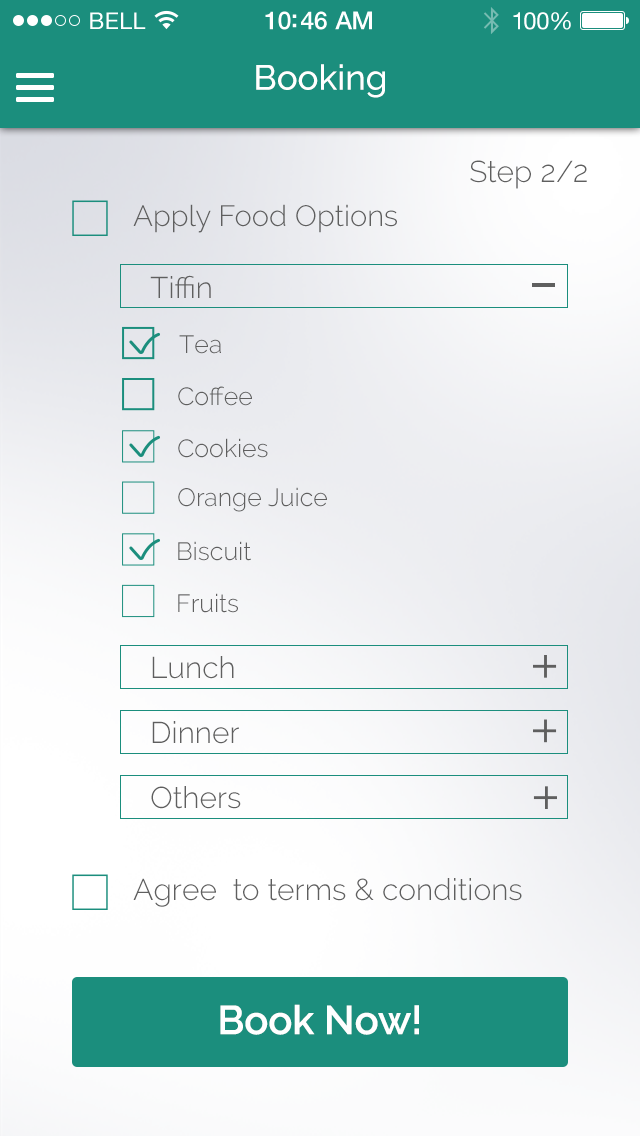
<style>
.page{position:relative;width:640px;height:1136px}
.page>*{position:absolute;margin:0}
.t1{font:23px "HelveticaNeue";letter-spacing:0.02em;color:#ffffff}
.t2{font:25px "HelveticaNeue-Medium";letter-spacing:-0.02em;color:#ffffff}
.t3{font:24px "HelveticaNeue";letter-spacing:-0.02em;color:#ffffff}
.t4{font:35px "Raleway-Medium";color:#ffffff}
.t5{font:30px "Raleway-Light";color:#5f5f5f}
.t6{font:29.2px "Raleway-Light";color:#5f5f5f}
.t7{font:25px "Raleway-Light";color:#5f5f5f}
.t8{font:40px "Raleway-SemiBold";color:#ffffff}
</style>
<div class="page">
<p class="t1" style="left:90px;top:12px;width:56px;height:17px">BELL</p>
<p class="t2" style="left:265px;top:11px;width:107px;height:19px">10:46 AM</p>
<p class="t3" style="left:513px;top:12px;width:58px;height:18px">100%</p>
<p class="t4" style="left:256px;top:64px;width:129px;height:34px">Booking</p>
<p class="t5" style="left:470px;top:160px;width:117px;height:29px">Step 2/2</p>
<p class="t6" style="left:133px;top:204px;width:264px;height:29px">Apply Food Options</p>
<p class="t5" style="left:150px;top:275px;width:61px;height:23px">Tiffin</p>
<p class="t7" style="left:179px;top:335px;width:42px;height:19px">Tea</p>
<p class="t7" style="left:178px;top:386px;width:74px;height:20px">Coffee</p>
<p class="t7" style="left:178px;top:438px;width:90px;height:20px">Cookies</p>
<p class="t7" style="left:178px;top:487px;width:149px;height:25px">Orange Juice</p>
<p class="t7" style="left:178px;top:541px;width:73px;height:20px">Biscuit</p>
<p class="t7" style="left:178px;top:593px;width:60px;height:20px">Fruits</p>
<p class="t5" style="left:152px;top:656px;width:82px;height:23px">Lunch</p>
<p class="t5" style="left:152px;top:721px;width:87px;height:23px">Dinner</p>
<p class="t5" style="left:151px;top:786px;width:90px;height:23px">Others</p>
<p class="t5" style="left:133px;top:878px;width:389px;height:29px">Agree  to terms &amp; conditions</p>
<p class="t8" style="left:220px;top:1004px;width:199px;height:31px">Book Now!</p>
</div>
